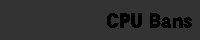
<style>
.page{position:relative;width:200px;height:40px;background:#333333}
.page>*{position:absolute;margin:0}
.t1{font:18px "DFGothic-SU-WINP-RKSJ-H";color:#000000}
</style>
<div class="page">
<p class="t1" style="left:107px;top:13px;width:85px;height:15px">CPU Bans</p>
</div>
